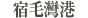
<style>
.page{position:relative;width:88px;height:18px;background:#ffffff}
.page>*{position:absolute;margin:0}
.t1{font:18px "RyuminPro-ExBold";letter-spacing:-0.04em;color:#4c4843;scale:0.9 1}
</style>
<div class="page">
<p class="t1" style="left:13px;top:0px;width:62px;height:18px">宿毛灣港</p>
</div>
